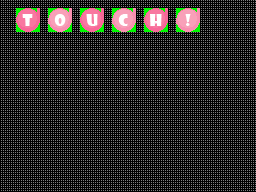
<style>
.page{position:relative;width:256px;height:192px;background:#000000}
.page>*{position:absolute;margin:0}
.t1{font:16px "ShowcardGothic-Reg";letter-spacing:0.025em;color:#ffffff}
</style>
<div class="page">
<p class="t1" style="left:22px;top:14px;width:11px;height:12px">T</p>
<p class="t1" style="left:54px;top:14px;width:12px;height:12px">o</p>
<p class="t1" style="left:86px;top:14px;width:12px;height:12px">u</p>
<p class="t1" style="left:118px;top:14px;width:10px;height:12px">c</p>
<p class="t1" style="left:150px;top:14px;width:12px;height:12px">h</p>
<p class="t1" style="left:185px;top:14px;width:6px;height:12px">!</p>
</div>
